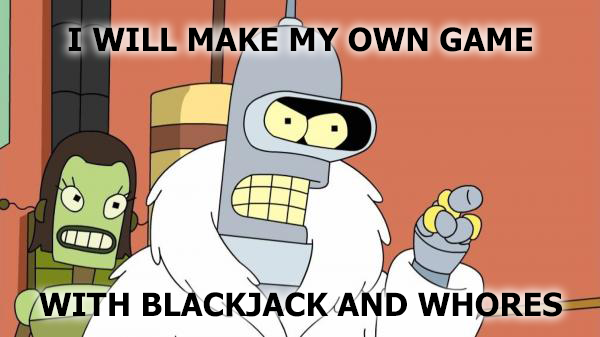
<style>
.page{position:relative;width:600px;height:337px}
.page>*{position:absolute;margin:0}
.t1{font:32px "Tahoma-Bold";color:#000000}
</style>
<div class="page">
<p class="t1" style="left:68px;top:27px;width:464px;height:25px">I WILL MAKE MY OWN GAME</p>
<p class="t1" style="left:39px;top:292px;width:523px;height:25px">WITH BLACKJACK AND WHORES</p>
</div>
